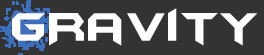
<style>
.page{position:relative;width:264px;height:55px;background:#333333}
.page>*{position:absolute;margin:0}
.t1{font:46.9px "BatmanForeverAlternateCyr";color:#fefefe}
</style>
<div class="page">
<p class="t1" style="left:12px;top:8px;width:246px;height:38px">GRavity</p>
</div>
